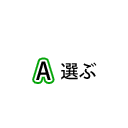
<style>
.page{position:relative;width:128px;height:128px;background:#ffffff}
.page>*{position:absolute;margin:0}
.t1{font:18px "KozGoPr6N-Medium";color:#000000}
</style>
<div class="page">
<p class="t1" style="left:61px;top:62px;width:36px;height:18px">選ぶ</p>
</div>
